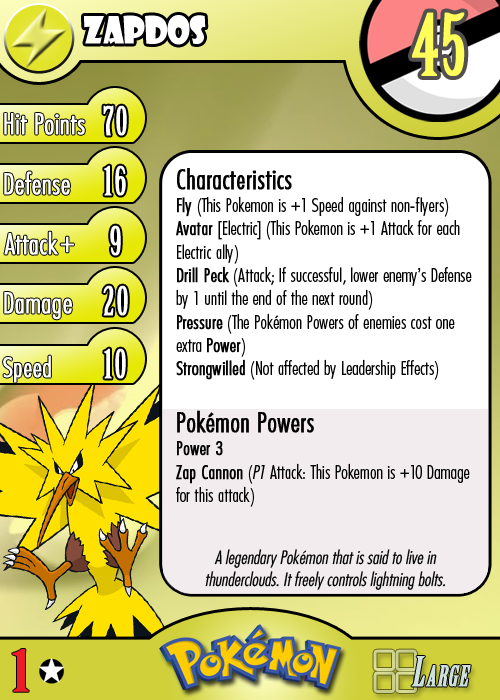
<style>
.page{position:relative;width:500px;height:700px;background:#ffffff}
.page>*{position:absolute;margin:0}
.t1{font:36.7px "ShowcardGothic-Reg";letter-spacing:-0.025em;color:#ffffff;scale:0.91 1}
.t2{font:83.3px "BirchStd";letter-spacing:0.025em;color:#fffd59;font-weight:bold}
.t3{font:27.8px "Futura-CondensedLight";color:#ffffff;font-weight:bold}
.t4{font:38.9px "BirchStd";letter-spacing:0.035em;color:#ffffff;font-weight:bold}
.t5{font:19.4px "FuturaCondensedBQ-Light";color:#010101}
.t6{font:27.8px "FuturaCondensedBQ-Light";color:#010101;font-weight:bold}
.t7{font:19.4px "FuturaCondensedBQ-Light";color:#010101;font-weight:bold}
.t8{font:19.4px "FuturaCondensedBQ-Light";color:#010101;font-style:italic}
.t9{font:30.6px "Futura-CondensedLight";color:#ffffff;font-weight:bold}
.t10{font:27.8px "FuturaCondensedBQ-Light";color:#ffffff;font-weight:bold}
.t11{font:18.1px "Futura-CondensedLight";color:#010101;font-style:italic}
.t12{font:55.6px "BirchStd";color:#ed1c24;font-weight:bold;scale:1.5 1}
</style>
<div class="page">
<p class="t1" style="left:84px;top:15px;width:122px;height:30px">zapdos</p>
<p class="t2" style="left:412px;top:12px;width:53px;height:64px">45</p>
<p class="t3" style="left:4px;top:113px;width:81px;height:22px">Hit Points</p>
<p class="t4" style="left:103px;top:105px;width:24px;height:31px">70</p>
<p class="t3" style="left:4px;top:171px;width:66px;height:24px">Defense</p>
<p class="t4" style="left:104px;top:165px;width:22px;height:31px">16</p>
<p class="t5" style="left:176px;top:168px;width:296px;height:339px"><span class="t6">Characteristics<br></span><span class="t7">Fly </span>(This Pokemon is +1 Speed against non-flyers)<br><span class="t7">Avatar </span>[Electric] (This Pokemon is +1 Attack for each Electric ally)<br><span class="t7">Drill Peck</span> (Attack; If successful, lower enemy’s Defense by 1 until the end of the next round)<br><span class="t7">Pressure</span> (The Pokémon Powers of enemies cost one extra <span class="t7">Power</span>)<br><span class="t7">Strongwilled</span> (Not affected by Leadership Effects)<br><br><span class="t6">Pokémon Powers<br></span><span class="t7">Power 3<br>Zap Cannon</span> (<span class="t8">P1</span> Attack: This Pokemon is +10 Damage for this attack)</p>
<p class="t3" style="left:4px;top:231px;width:54px;height:24px">Attack</p>
<p class="t4" style="left:110px;top:225px;width:11px;height:31px">9</p>
<p class="t9" style="left:60px;top:236px;width:14px;height:17px">+</p>
<p class="t3" style="left:4px;top:292px;width:68px;height:28px">Damage</p>
<p class="t4" style="left:103px;top:285px;width:25px;height:31px">20</p>
<p class="t4" style="left:104px;top:348px;width:22px;height:31px">10</p>
<p class="t10" style="left:3px;top:355px;width:48px;height:28px">Speed</p>
<p class="t11" style="left:205px;top:549px;width:241px;height:41px;text-align:center">A legendary Pokémon that is said to live in thunderclouds. It freely controls lightning bolts.</p>
<p class="t12" style="left:12px;top:649px;width:17px;height:43px">1</p>
</div>
